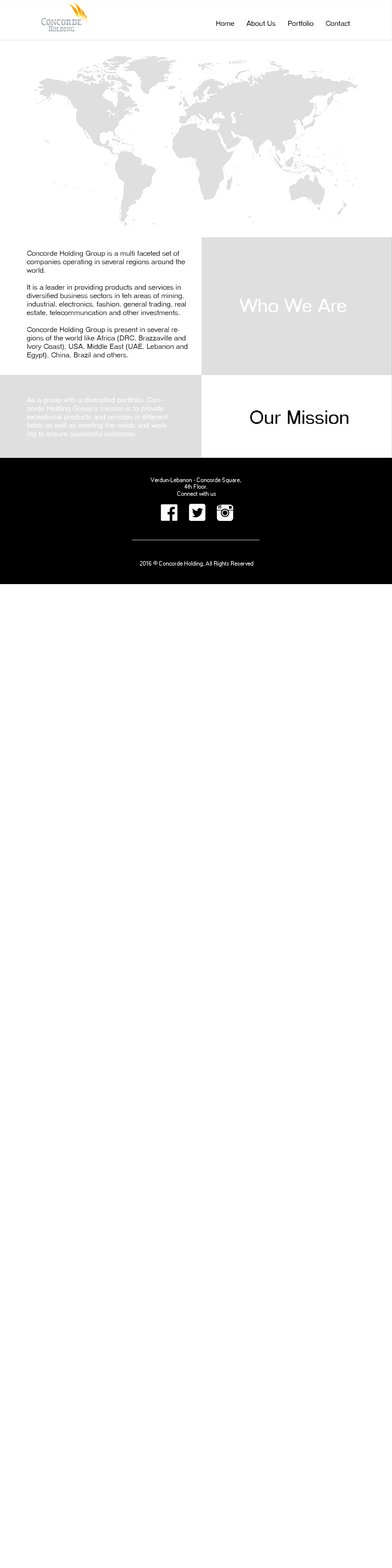
<style>
.page{position:relative;width:392px;height:1568px;background:#ffffff}
.page>*{position:absolute;margin:0}
.t1{font:7.1px "MS Sans Serif";color:#1f1f1f}
.t2{font:18.8px "MS Sans Serif";color:#ffffff}
.t3{font:7.1px "MS Sans Serif";color:#ffffff}
.t4{font:18.8px "MS Sans Serif";color:#000000}
</style>
<div class="page">
<p class="t1" style="left:27px;top:250px;width:160px;height:109px">Concorde Holding Group is a multi faceted set of companies operating in several regions around the world.<br><br>It is a leader in providing products and services in diversified business sectors in teh areas of mining, industrial, electronics, fashion, general trading, real estate, telecommuncation and other investments.<br><br>Concorde Holding Group is present in several regions of the world like Africa (DRC, Brazzaville and Ivory Coast), USA, Middle East (UAE, Lebanon and Egypt), China, Brazil and others.</p>
<p class="t2" style="left:240px;top:299px;width:107px;height:13px">Who We Are</p>
<p class="t3" style="left:27px;top:397px;width:142px;height:41px">As a group with a diversified portfolio, Concorde Holding Group’s mission is to provide exceptional products and services in different fields as well as meeting the needs and working to ensure successful outcomes.</p>
<p class="t4" style="left:250px;top:410px;width:98px;height:14px">Our Mission</p>
</div>
